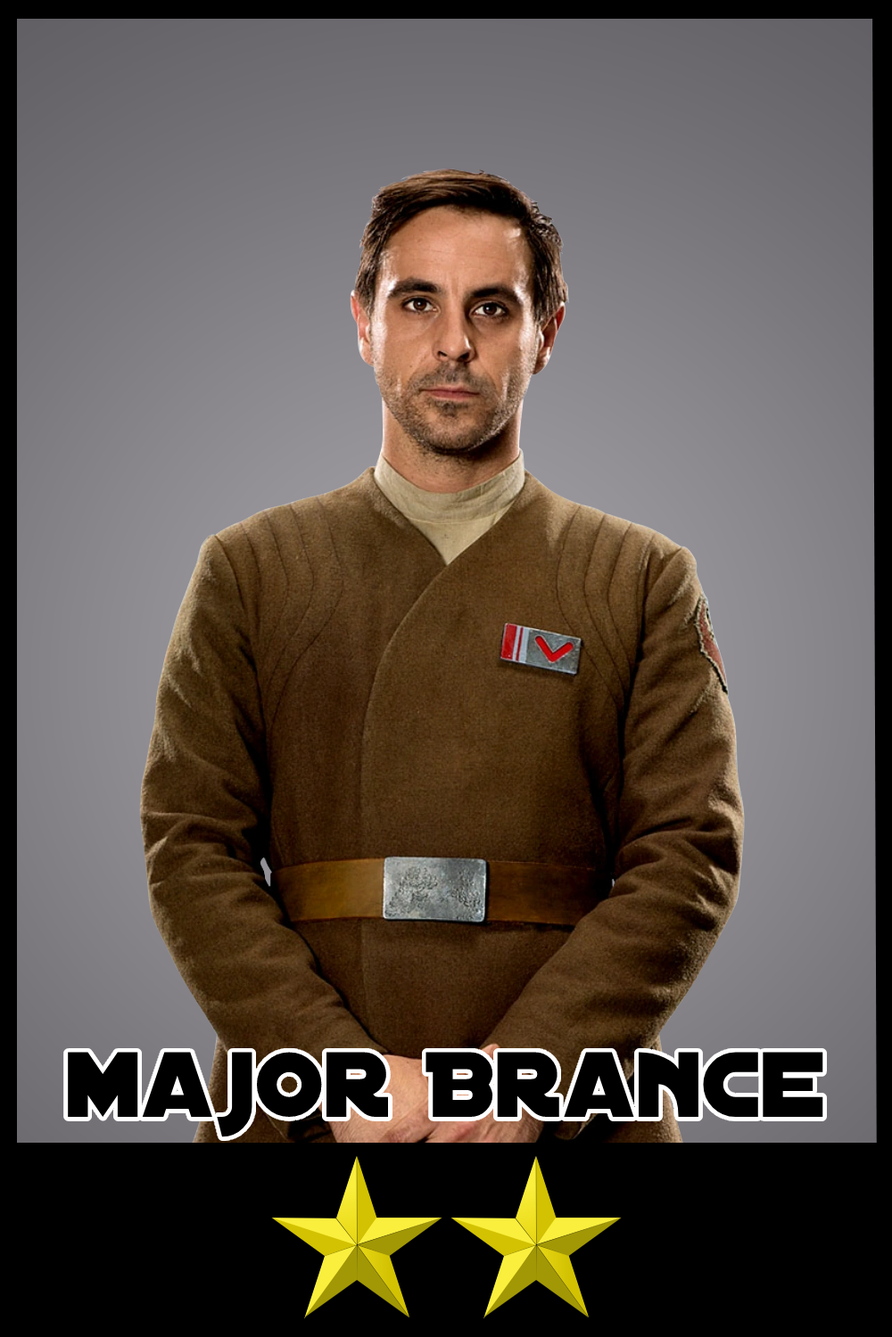
<style>
.page{position:relative;width:892px;height:1337px}
.page>*{position:absolute;margin:0}
.t1{font:99.4px "DistantGalaxy";color:#000000}
</style>
<div class="page">
<p class="t1" style="left:68px;top:1052px;width:755px;height:86px">major Brance</p>
</div>
